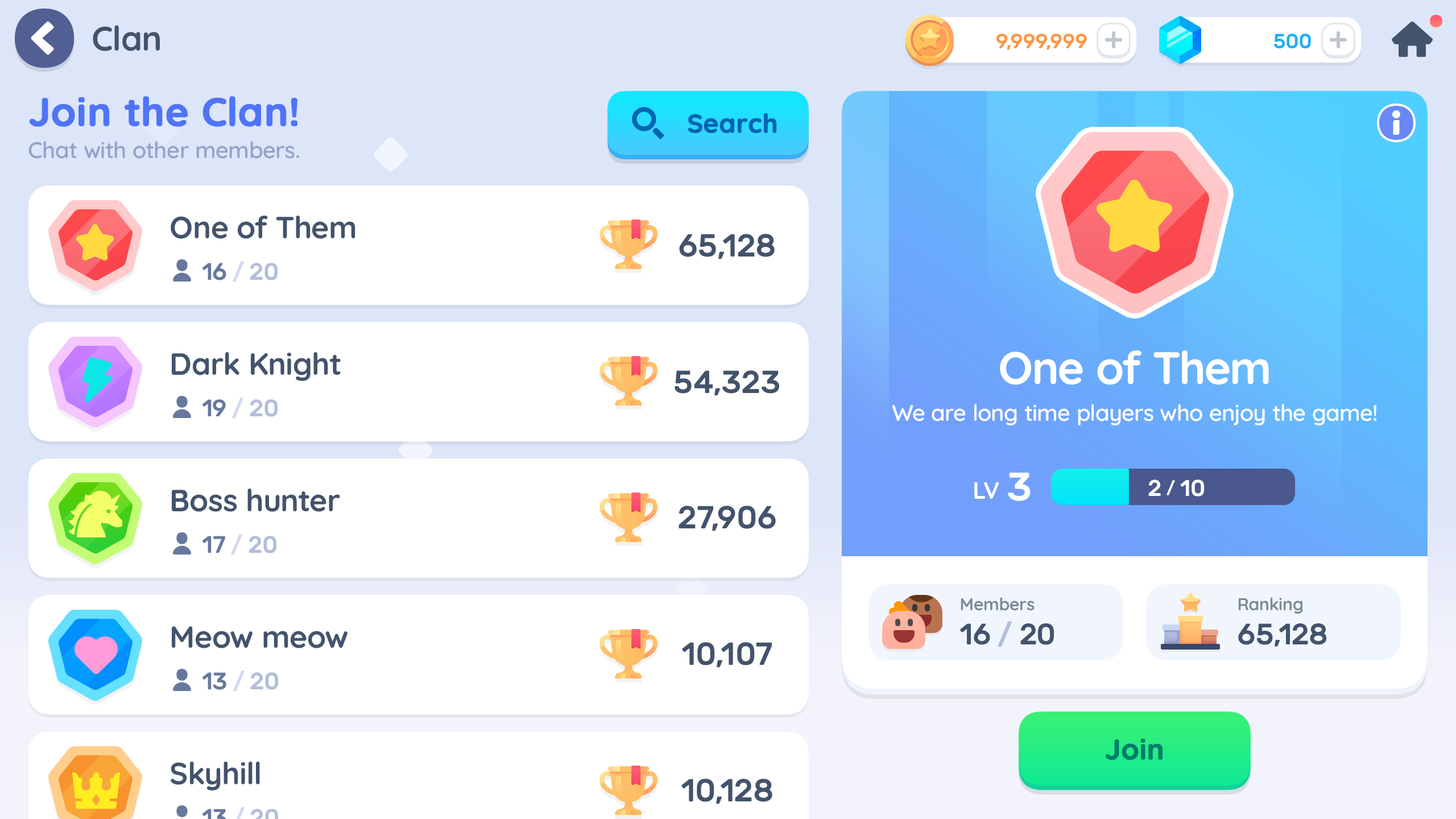
<style>
.page{position:relative;width:1456px;height:819px;background:#ffffff}
.page>*{position:absolute;margin:0}
.t1{font:34.1px "Quicksand-Bold";letter-spacing:-0.01em;color:#43536c}
.t2{font:20.5px "Rubik-Medium";letter-spacing:-0.01em;color:#fd9744;text-transform:uppercase}
.t3{font:20.5px "Rubik-Medium";letter-spacing:-0.01em;color:#1cb0f6;text-transform:uppercase}
.t4{font:39.8px "Quicksand-Bold";color:#4f74f6;font-weight:bold}
.t5{font:26.2px "Quicksand-Bold";color:#0065b4;font-weight:bold}
.t6{font:22.7px "Quicksand-SemiBold";letter-spacing:-0.01em;color:#93a2c9}
.t7{font:30.7px "Quicksand-Bold";letter-spacing:-0.01em;color:#43536c}
.t8{font:31.8px "Rubik-Medium";letter-spacing:-0.01em;color:#43536c}
.t9{font:23.9px "Rubik-Medium";letter-spacing:-0.01em;color:#67789c}
.t10{font:23.9px "Rubik-Medium";letter-spacing:-0.01em;color:#d5d8ef}
.t11{font:23.9px "Rubik-Medium";letter-spacing:-0.01em;color:#b3bedb}
.t12{font:45.5px "Quicksand-Bold";letter-spacing:-0.01em;color:#ffffff}
.t13{font:22.7px "Quicksand-SemiBold";letter-spacing:-0.01em;color:#ffffff}
.t14{font:39.8px "Rubik-Medium";letter-spacing:-0.01em;color:#ffffff}
.t15{font:23.9px "Quicksand-Bold";letter-spacing:-0.01em;color:#ffffff}
.t16{font:22.7px "Rubik-Medium";letter-spacing:-0.01em;color:#ffffff;text-transform:uppercase}
.t17{font:17.1px "Rubik-Medium";letter-spacing:-0.01em;color:#ffffff;text-transform:uppercase}
.t18{font:17.1px "Quicksand-Bold";letter-spacing:-0.01em;color:#7c8a97}
.t19{font:29.6px "Rubik-Medium";letter-spacing:-0.01em;color:#43536c;text-transform:uppercase}
.t20{font:29.6px "Rubik-Medium";letter-spacing:-0.01em;color:#b3bedb;text-transform:uppercase}
.t21{font:28.4px "Quicksand-Bold";color:#007c69;font-weight:bold}
</style>
<div class="page">
<p class="t1" style="left:93px;top:25px;width:67px;height:26px">Clan</p>
<p class="t2" style="left:996px;top:34px;width:91px;height:16px">9,999,999</p>
<p class="t3" style="left:1274px;top:34px;width:37px;height:14px">500</p>
<p class="t4" style="left:29px;top:96px;width:268px;height:31px">Join the Clan!</p>
<p class="t5" style="left:688px;top:113px;width:89px;height:20px">Search</p>
<p class="t6" style="left:28px;top:141px;width:271px;height:18px">Chat with other members.</p>
<p class="t7" style="left:171px;top:216px;width:184px;height:23px">One of Them</p>
<p class="t8" style="left:679px;top:234px;width:96px;height:25px">65,128</p>
<p class="t9" style="left:202px;top:261px;width:76px;height:21px">16 <span class="t10">/ </span><span class="t11">20</span></p>
<p class="t7" style="left:172px;top:352px;width:169px;height:29px">Dark Knight</p>
<p class="t12" style="left:1000px;top:350px;width:269px;height:35px">One of Them</p>
<p class="t8" style="left:675px;top:370px;width:104px;height:26px">54,323</p>
<p class="t9" style="left:202px;top:398px;width:76px;height:21px">19 <span class="t10">/ </span><span class="t11">20</span></p>
<p class="t13" style="left:892px;top:404px;width:484px;height:21px">We are long time players who enjoy the game!</p>
<p class="t14" style="left:1008px;top:473px;width:23px;height:28px">3</p>
<p class="t15" style="left:974px;top:482px;width:25px;height:17px">LV</p>
<p class="t16" style="left:1148px;top:479px;width:56px;height:18px">2 <span class="t17">/</span> 10</p>
<p class="t7" style="left:172px;top:489px;width:168px;height:23px">Boss hunter</p>
<p class="t8" style="left:679px;top:506px;width:97px;height:25px">27,906</p>
<p class="t9" style="left:202px;top:534px;width:74px;height:21px">17 <span class="t10">/ </span><span class="t11">20</span></p>
<p class="t18" style="left:961px;top:597px;width:74px;height:14px">Members</p>
<p class="t18" style="left:1238px;top:597px;width:64px;height:17px">Ranking</p>
<p class="t7" style="left:172px;top:626px;width:176px;height:22px">Meow meow</p>
<p class="t19" style="left:960px;top:621px;width:94px;height:26px">16 <span class="t20">/</span> 20</p>
<p class="t19" style="left:1238px;top:623px;width:89px;height:24px">65,128</p>
<p class="t8" style="left:682px;top:642px;width:90px;height:26px">10,107</p>
<p class="t9" style="left:202px;top:671px;width:76px;height:21px">13 <span class="t10">/ </span><span class="t11">20</span></p>
<p class="t21" style="left:1106px;top:739px;width:57px;height:21px">Join</p>
<p class="t7" style="left:171px;top:762px;width:89px;height:29px">Skyhill</p>
<p class="t8" style="left:681px;top:779px;width:91px;height:25px">10,128</p>
</div>
